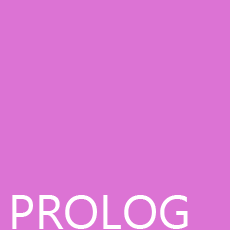
<style>
.page{position:relative;width:230px;height:230px;background:#dc73d4}
.page>*{position:absolute;margin:0}
.t1{font:48px "Leelawadee";color:#ffffff}
</style>
<div class="page">
<p class="t1" style="left:12px;top:195px;width:176px;height:34px">PROLOG</p>
</div>
